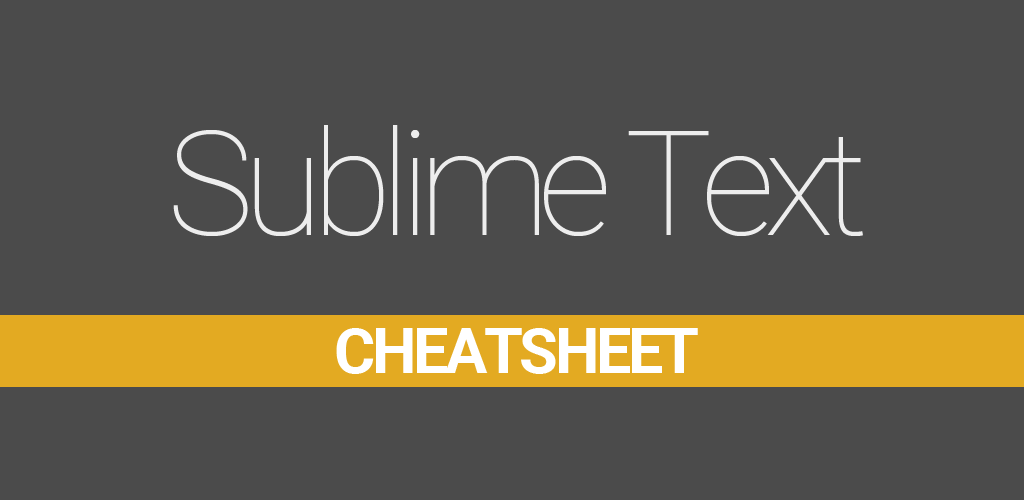
<style>
.page{position:relative;width:1024px;height:500px;background:#4b4b4b}
.page>*{position:absolute;margin:0}
.t1{font:145.8px "Roboto-Thin";letter-spacing:-0.075em;color:#ededed}
</style>
<div class="page">
<p class="t1" style="left:173px;top:125px;width:690px;height:111px">Sublime Text</p>
</div>
